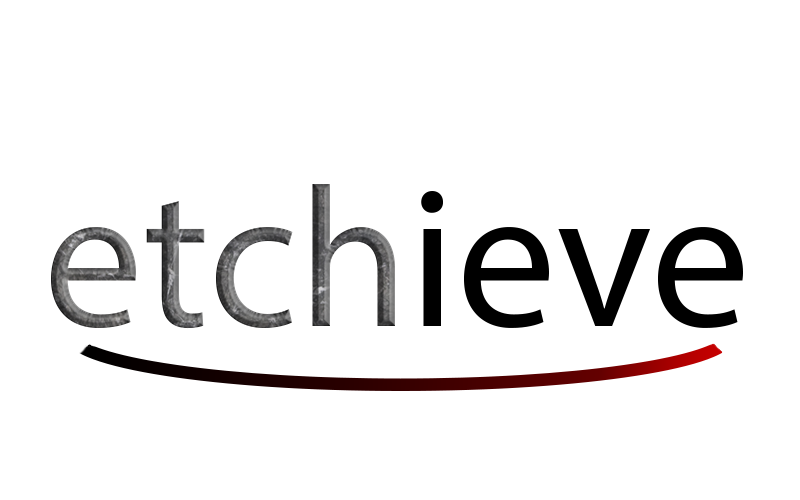
<style>
.page{position:relative;width:800px;height:500px;background:#ffffff}
.page>*{position:absolute;margin:0}
.t1{font:200px "MyriadPro-Regular"}
.t2{font:200px "MyriadPro-Regular";color:#000000}
</style>
<div class="page">
<p class="t1" style="left:51px;top:184px;width:344px;height:145px">etch</p>
<p class="t2" style="left:421px;top:191px;width:322px;height:137px">ieve</p>
</div>
